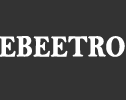
<style>
.page{position:relative;width:126px;height:100px;background:#333333}
.page>*{position:absolute;margin:0}
.t1{font:29.7px "BellMTBold";color:#ffffff;font-weight:bold;scale:0.86 1}
</style>
<div class="page">
<p class="t1" style="left:0px;top:36px;width:125px;height:21px">EBEETRO</p>
</div>
